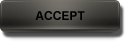
<style>
.page{position:relative;width:126px;height:42px}
.page>*{position:absolute;margin:0}
.t1{font:12px "Arial-BoldMT";color:#000000}
</style>
<div class="page">
<p class="t1" style="left:35px;top:11px;width:50px;height:9px">ACCEPT</p>
</div>
